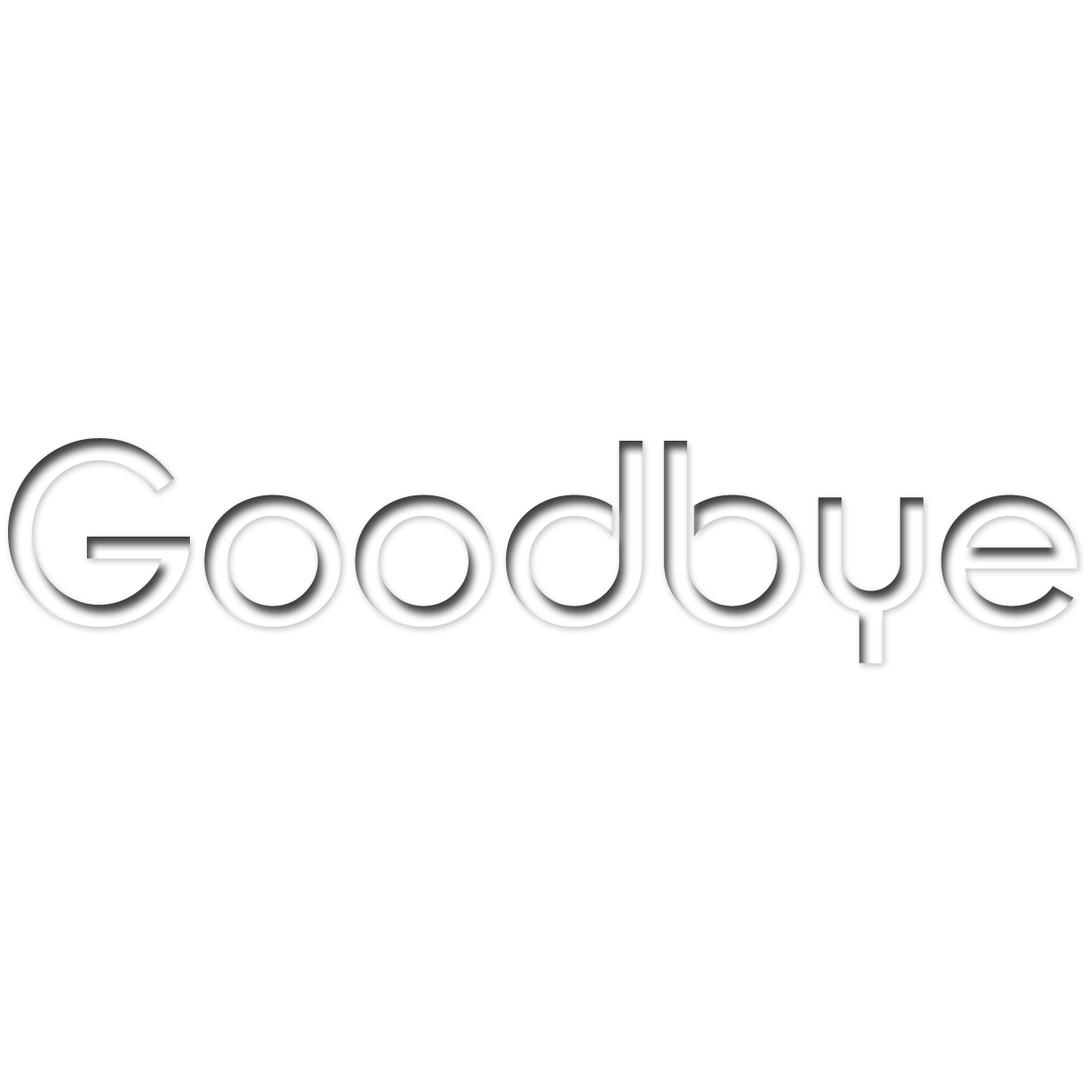
<style>
.page{position:relative;width:1092px;height:1092px;background:#ffffff}
.page>*{position:absolute;margin:0}
.t1{font:241.9px "Belgium"}
</style>
<div class="page">
<p class="t1" style="left:8px;top:438px;width:1070px;height:226px">Goodbye</p>
</div>
